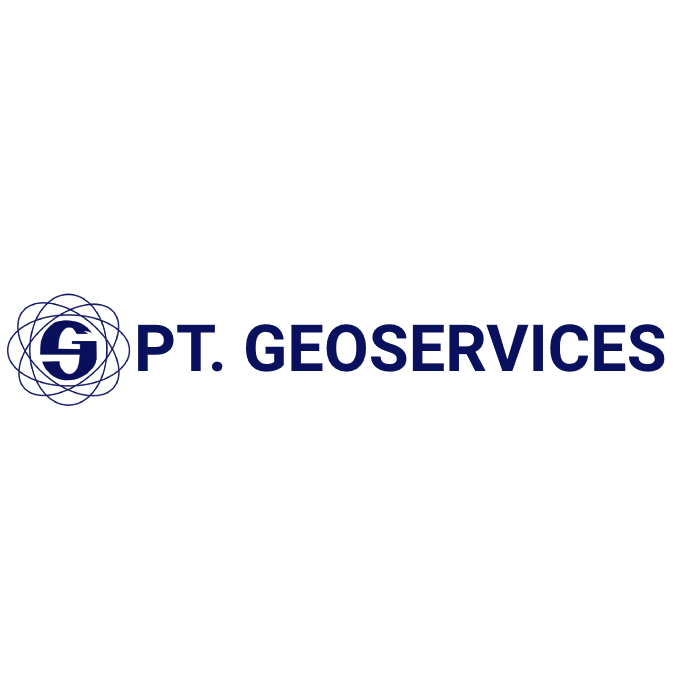
<style>
.page{position:relative;width:700px;height:700px;background:#ffffff}
.page>*{position:absolute;margin:0}
.t1{font:65px "Roboto-Bold";color:#09105d}
</style>
<div class="page">
<p class="t1" style="left:138px;top:324px;width:527px;height:48px">PT. GEOSERVICES</p>
</div>
